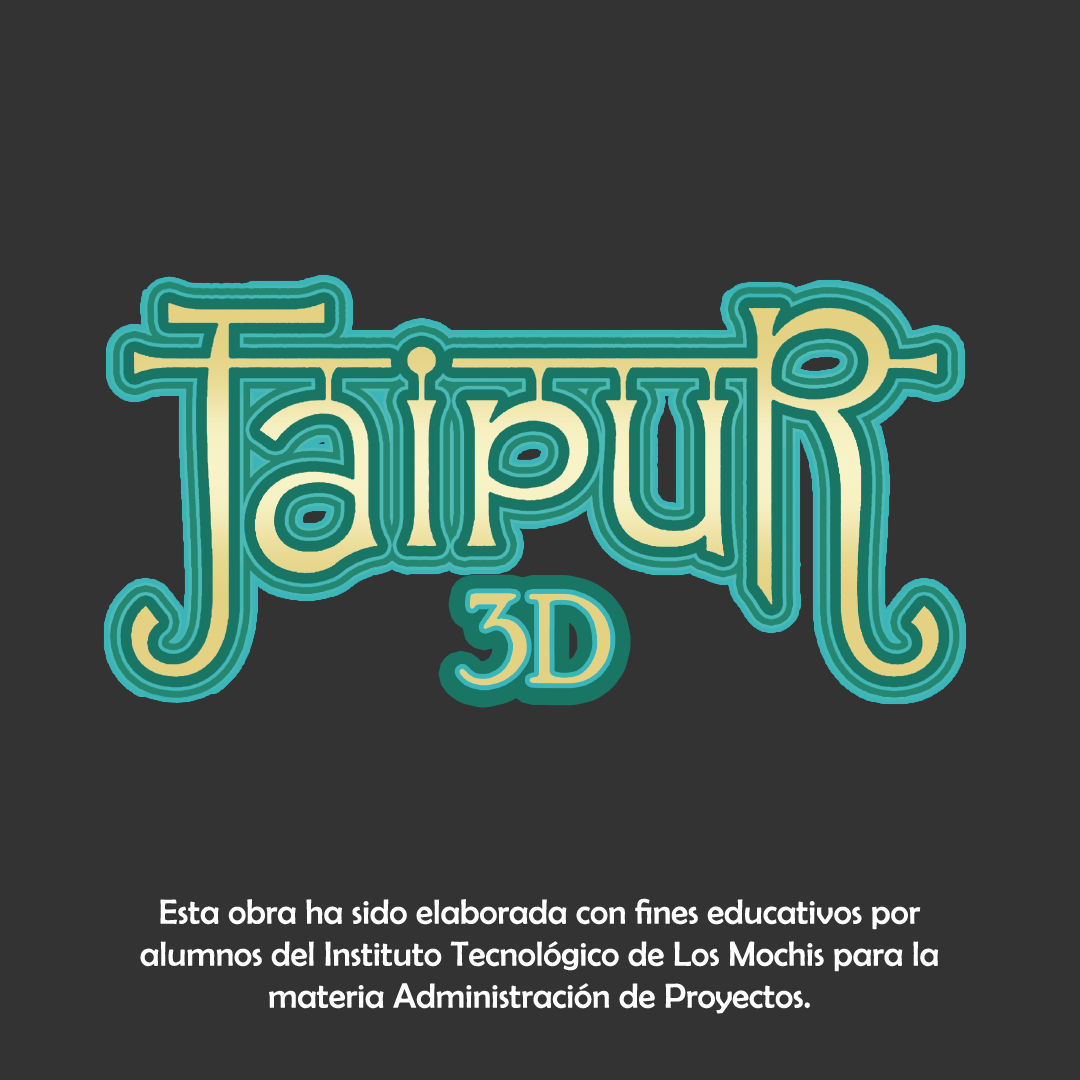
<style>
.page{position:relative;width:1080px;height:1080px;background:#333333}
.page>*{position:absolute;margin:0}
.t1{font:126.1px "PoorRichard-Regular";color:#e4d182}
.t2{font:35px "BerlinSansFB-Reg";color:#ffffff}
</style>
<div class="page">
<p class="t1" style="left:458px;top:594px;width:153px;height:94px">3D</p>
<p class="t2" style="left:140px;top:898px;width:799px;height:116px;text-align:center">Esta obra ha sido elaborada con fines educativos por alumnos del Instituto Tecnológico de Los Mochis para la materia Administración de Proyectos.</p>
</div>
